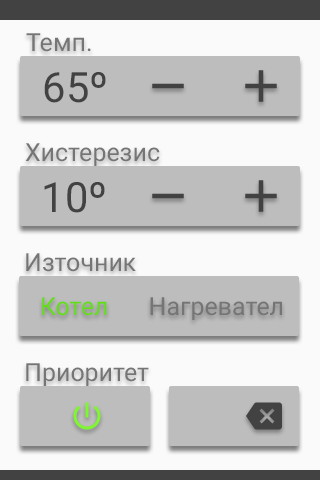
<style>
.page{position:relative;width:320px;height:480px;background:#bdbdbd}
.page>*{position:absolute;margin:0}
.t1{font:25px "Roboto-Regular";color:#757575}
.t2{font:41.7px "Roboto-Regular";color:#424242}
.t3{font:25px "Roboto-Regular";color:#64dd17}
</style>
<div class="page">
<p class="t1" style="left:26px;top:33px;width:65px;height:19px">Темп.</p>
<p class="t2" style="left:44px;top:72px;width:62px;height:31px">65º</p>
<p class="t1" style="left:25px;top:143px;width:135px;height:23px">Хистерезис</p>
<p class="t2" style="left:44px;top:182px;width:61px;height:31px">10º</p>
<p class="t1" style="left:26px;top:253px;width:110px;height:19px">Източник</p>
<p class="t3" style="left:42px;top:297px;width:65px;height:19px">Котел</p>
<p class="t1" style="left:150px;top:297px;width:132px;height:23px">Нагревател</p>
<p class="t1" style="left:26px;top:363px;width:123px;height:23px">Приоритет</p>
</div>
